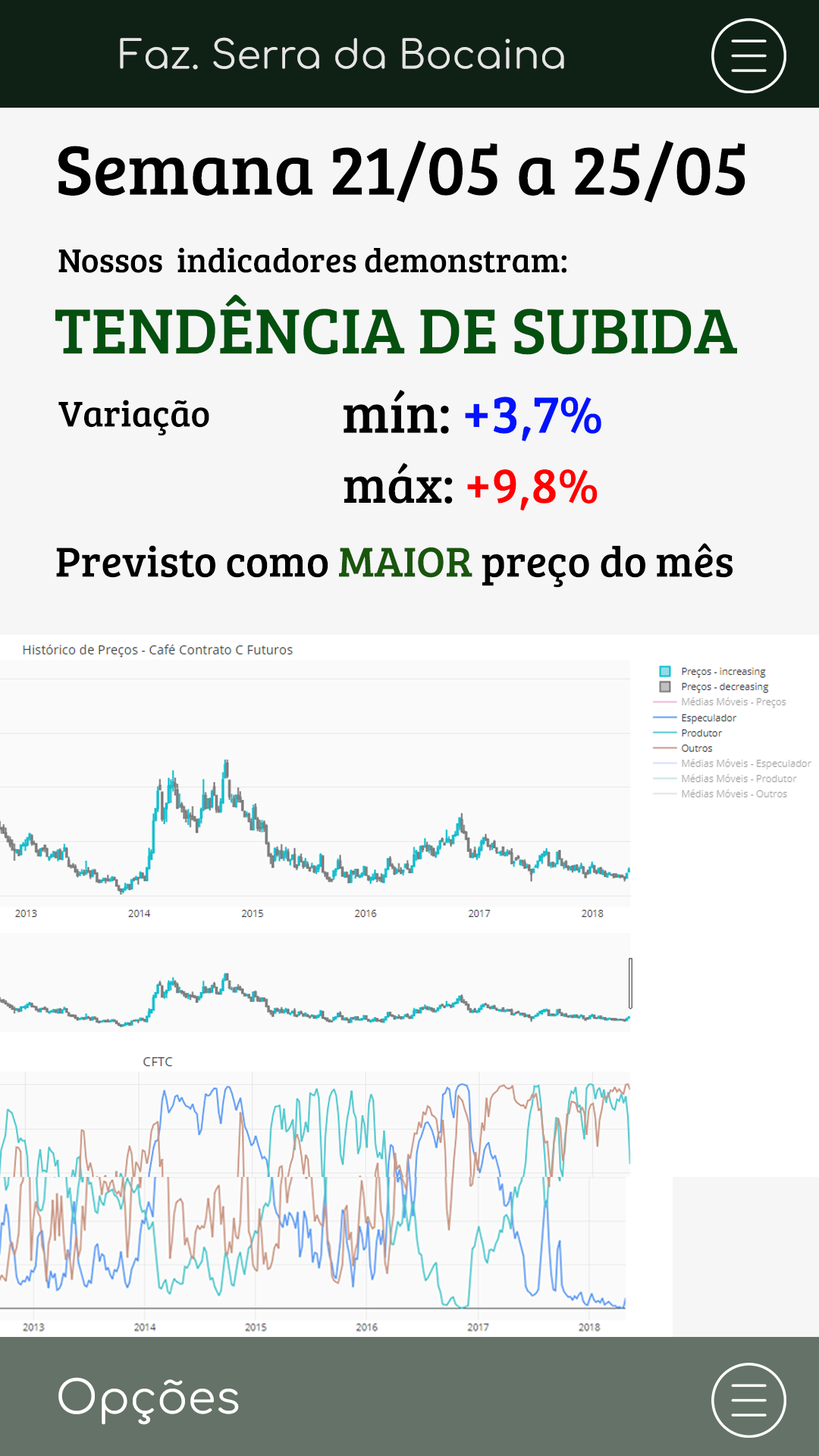
<style>
.page{position:relative;width:819px;height:1456px;background:#f6f6f6}
.page>*{position:absolute;margin:0}
.t1{font:39.1px "Comfortaa-Regular";color:#e5e5e5}
.t2{font:71.8px "BreeSerif-Regular";color:#000000}
.t3{font:34.1px "BreeSerif-Regular";color:#000000}
.t4{font:66.1px "BreeSerif-Regular";color:#04500f}
.t5{font:54.8px "BreeSerif-Regular";color:#0012fe}
.t6{font:54.8px "BreeSerif-Regular";color:#000000}
.t7{font:36.9px "BreeSerif-Regular";color:#000000}
.t8{font:50.8px "BreeSerif-Regular";color:#ff0000}
.t9{font:50.8px "BreeSerif-Regular";color:#000000}
.t10{font:43.5px "BreeSerif-Regular";color:#000000}
.t11{font:43.5px "BreeSerif-Regular";color:#19560b}
.t12{font:45.5px "Comfortaa-Regular";color:#ffffff}
</style>
<div class="page">
<p class="t1" style="left:120px;top:37px;width:444px;height:33px">Faz. Serra da Bocaina</p>
<p class="t2" style="left:58px;top:140px;width:687px;height:63px">Semana 21/05 a 25/05</p>
<p class="t3" style="left:58px;top:247px;width:508px;height:26px">Nossos  indicadores demonstram:</p>
<p class="t4" style="left:55px;top:294px;width:682px;height:61px">TENDÊNCIA DE SUBIDA</p>
<p class="t5" style="left:344px;top:390px;width:257px;height:51px"><span class="t6">mín: </span>+3,7%</p>
<p class="t7" style="left:58px;top:400px;width:151px;height:36px">Variação</p>
<p class="t8" style="left:344px;top:463px;width:254px;height:48px"><span class="t9">máx: </span>+9,8%</p>
<p class="t10" style="left:56px;top:543px;width:677px;height:45px">Previsto como <span class="t11">MAIOR</span> preço do mês</p>
<p class="t12" style="left:58px;top:1377px;width:181px;height:48px">Opções</p>
</div>
